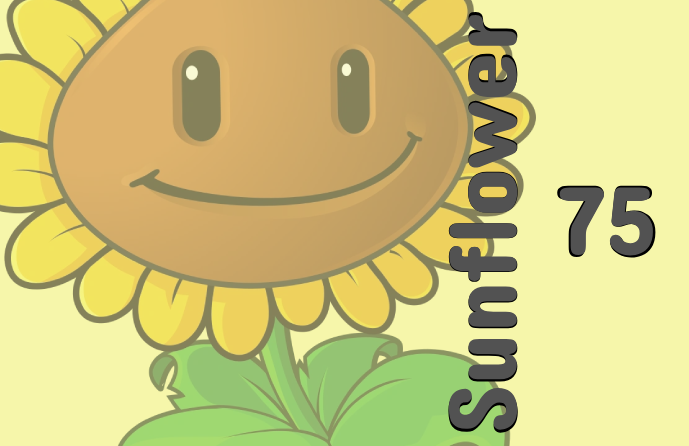
<style>
.page{position:relative;width:689px;height:446px;background:#f6f6aa}
.page>*{position:absolute;margin:0}
.t1{font:100.2px "ConcertOne-Regular";color:#525252}
.t2{font:98.8px "ConcertOne-Regular";color:#525252}
.t3{font:104.1px "ConcertOne-Regular";color:#525252}
</style>
<div class="page">
<p class="t1" style="left:448px;top:12px;width:70px;height:421px;rotate:-90deg">Sunflower</p>
<p class="t2" style="left:448px;top:15px;width:70px;height:415px;rotate:-90deg">Sunflower</p>
<p class="t3" style="left:557px;top:185px;width:99px;height:73px">75</p>
<p class="t2" style="left:559px;top:187px;width:94px;height:69px">75</p>
</div>
